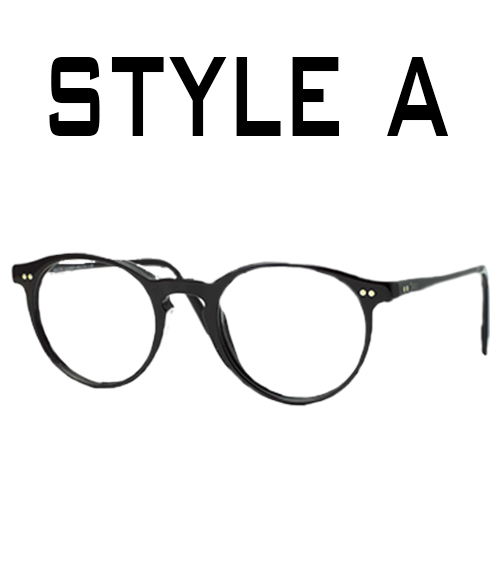
<style>
.page{position:relative;width:500px;height:583px;background:#ffffff}
.page>*{position:absolute;margin:0}
.t1{font:186.2px "BankGothicBT-Medium";color:#000000;scale:0.54 1}
</style>
<div class="page">
<p class="t1" style="left:49px;top:57px;width:400px;height:79px">style a</p>
</div>
